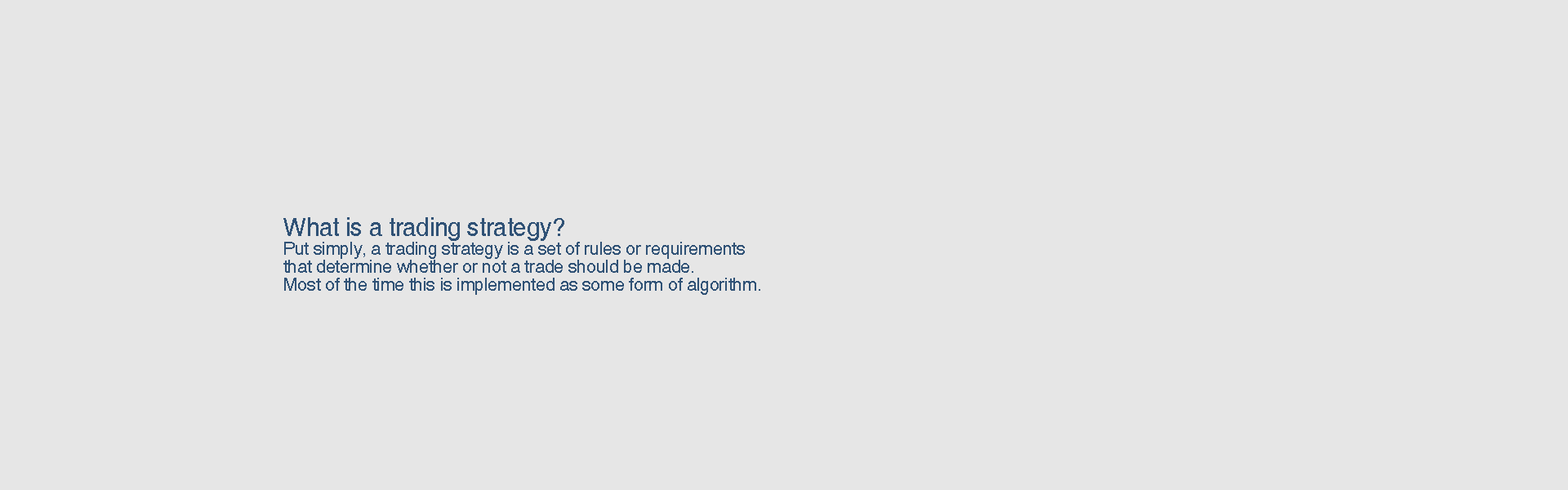
<style>
.page{position:relative;width:1568px;height:490px;background:#e6e6e6}
.page>*{position:absolute;margin:0}
.t1{font:25.3px "Helvetica";letter-spacing:-0.02em;color:#305276}
.t2{font:18.2px/17.8px "Helvetica";letter-spacing:-0.02em;color:#305276}
</style>
<div class="page">
<p class="t1" style="left:283px;top:217px;width:281px;height:24px">What is a trading strategy?</p>
<p class="t2" style="left:283px;top:242px;width:477px;height:53px">Put simply, a trading strategy is a set of rules or requirements <br>that determine whether or not a trade should be made. <br>Most of the time this is implemented as some form of algorithm.</p>
</div>
